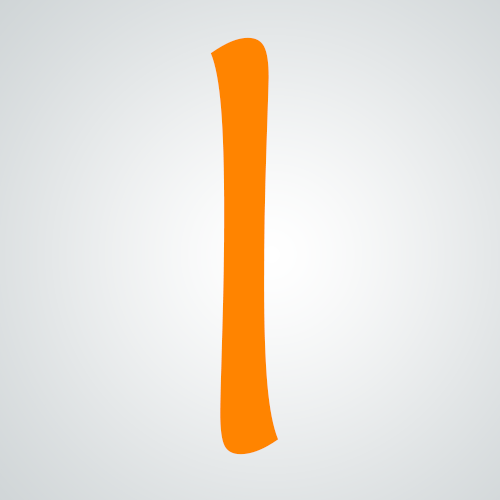
<style>
.page{position:relative;width:500px;height:500px}
.page>*{position:absolute;margin:0}
.t1{font:589.9px "MaiandraGD-Regular";color:#ff8400;font-weight:bold;scale:0.76 1}
</style>
<div class="page">
<p class="t1" style="left:210px;top:37px;width:69px;height:418px">I</p>
</div>
